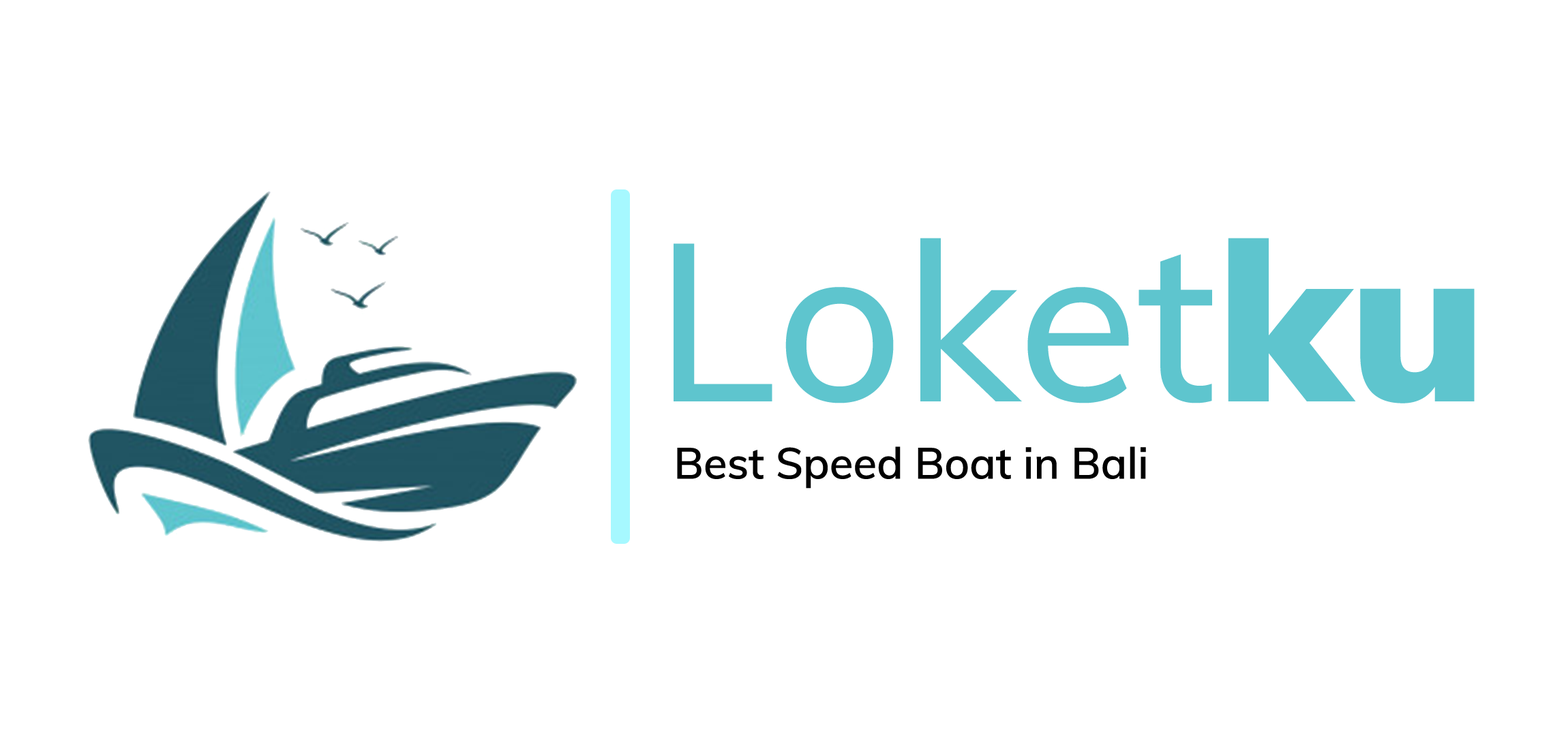
<style>
.page{position:relative;width:1568px;height:736px;background:#ffffff}
.page>*{position:absolute;margin:0}
.t1{font:221.6px "Muli-Medium";color:#5ec5ce}
.t2{font:221.6px "Muli-Black";color:#5ec5ce}
.t3{font:43.3px "Muli-SemiBold";color:#000000}
</style>
<div class="page">
<p class="t1" style="left:674px;top:238px;width:801px;height:166px">Loket<span class="t2">ku</span></p>
<p class="t3" style="left:677px;top:447px;width:469px;height:42px">Best Speed Boat in Bali</p>
</div>
